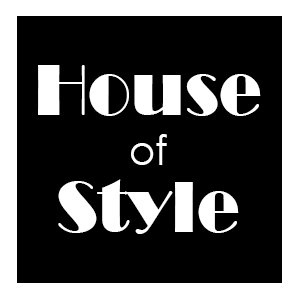
<style>
.page{position:relative;width:300px;height:300px;background:#000000}
.page>*{position:absolute;margin:0}
.t1{font:75px/66.7px "Broadway";color:#ffffff;scale:0.95 1}
.t2{font:41.7px/50px "CenturyGothic";color:#ffffff;scale:0.95 1}
</style>
<div class="page">
<p class="t1" style="left:38px;top:65px;width:223px;height:169px;text-align:center">House<br><span class="t2">of<br></span>Style</p>
</div>
